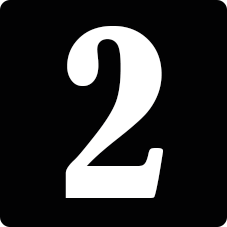
<style>
.page{position:relative;width:227px;height:227px;background:#020203}
.page>*{position:absolute;margin:0}
.t1{font:216px "BernardMT-Condensed";color:#ffffff}
</style>
<div class="page">
<p class="t1" style="left:65px;top:26px;width:98px;height:172px">2</p>
</div>
